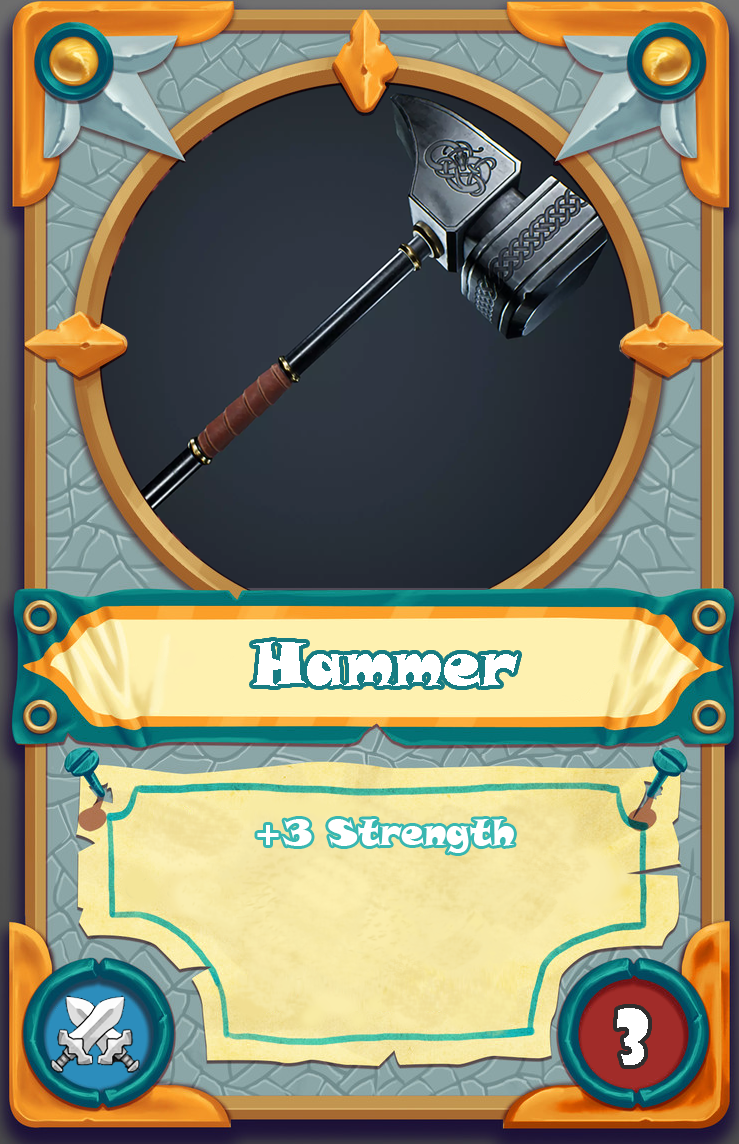
<style>
.page{position:relative;width:739px;height:1144px}
.page>*{position:absolute;margin:0}
.t1{font:60px "SnapITC-Regular";color:#ffffff}
.t2{font:36px "SnapITC-Regular";color:#ffffff}
.t3{font:72px "ShowcardGothic-Reg";color:#ffffff}
</style>
<div class="page">
<p class="t1" style="left:253px;top:641px;width:265px;height:45px">Hammer</p>
<p class="t2" style="left:257px;top:819px;width:257px;height:34px">+3 Strength</p>
<p class="t3" style="left:617px;top:1008px;width:31px;height:57px">3</p>
</div>
